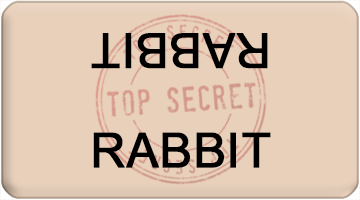
<style>
.page{position:relative;width:360px;height:200px;background:#e8d0bb}
.page>*{position:absolute;margin:0}
.t1{font:48px "ArialMT";color:#000000;font-weight:bold}
</style>
<div class="page">
<p class="t1" style="left:91px;top:33px;width:177px;height:36px;rotate:180deg">RABBIT</p>
<p class="t1" style="left:93px;top:132px;width:178px;height:36px">RABBIT</p>
</div>
